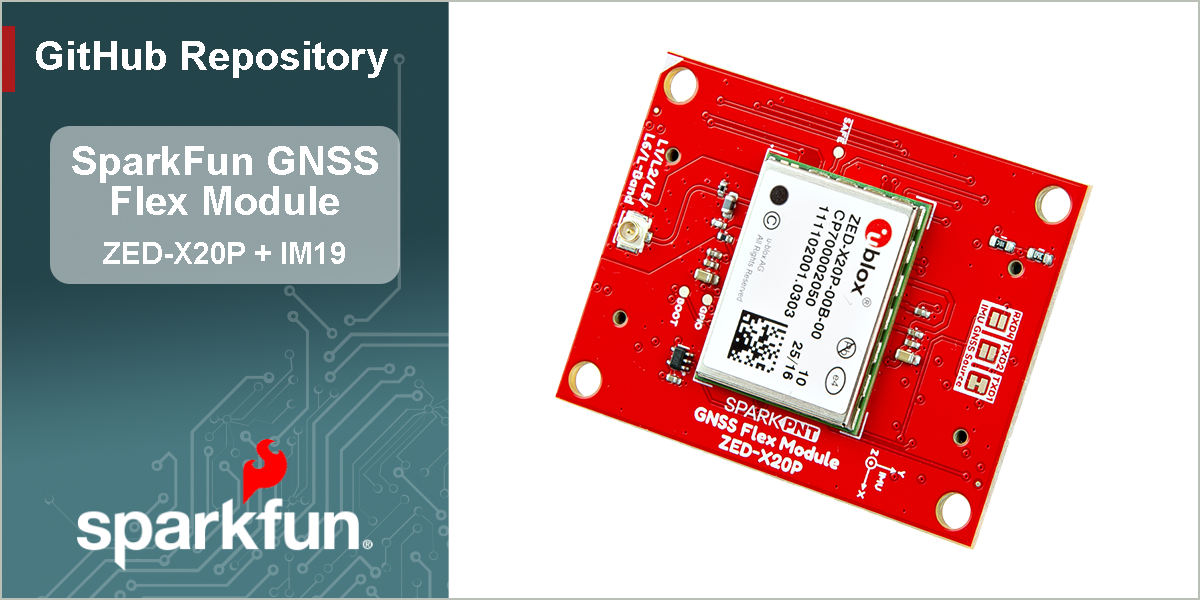
<style>
.page{position:relative;width:1200px;height:600px;background:#ffffff}
.page>*{position:absolute;margin:0}
.t1{font:40px "Arial-BoldMT";color:#ffffff}
.t2{font:30px "Arial-BoldMT";color:#ffffff}
</style>
<div class="page">
<p class="t1" style="left:36px;top:41px;width:352px;height:37px">GitHub Repository</p>
<p class="t1" style="left:72px;top:146px;width:306px;height:69px;text-align:center">SparkFun GNSS<br>Flex Module</p>
<p class="t2" style="left:103px;top:242px;width:242px;height:22px">ZED-X20P + IM19</p>
</div>
